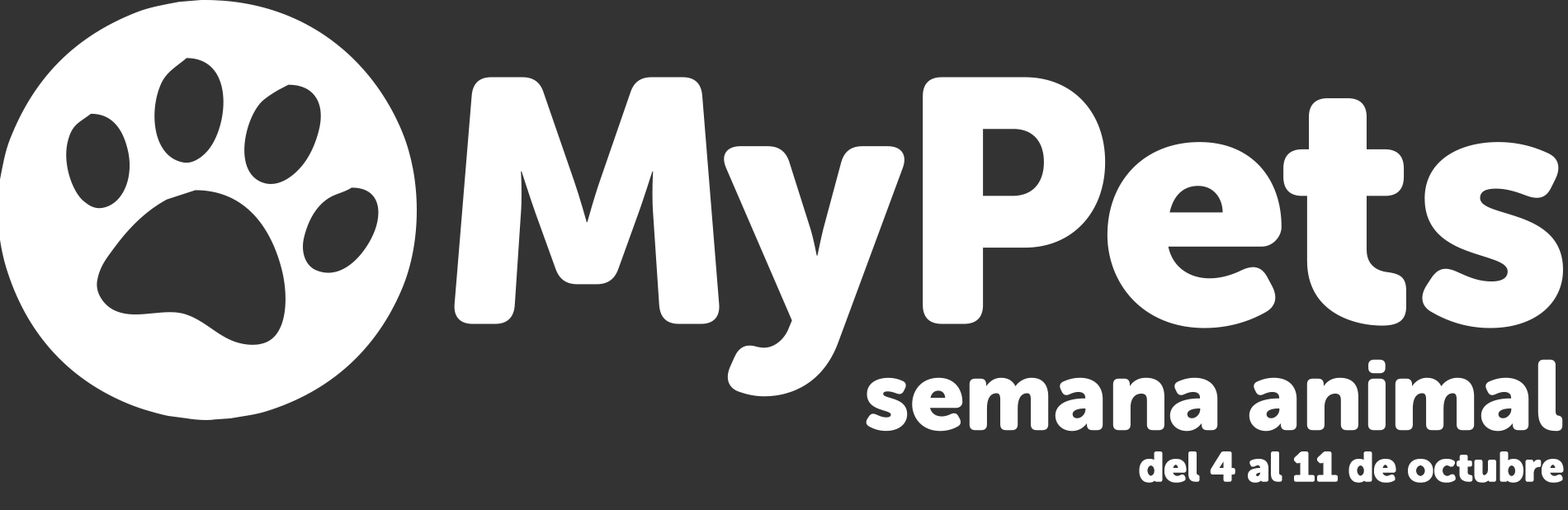
<style>
.page{position:relative;width:1568px;height:510px;background:#333333}
.page>*{position:absolute;margin:0}
.t1{font:98.6px "MuseoSansRounded-900";letter-spacing:-0.02em;color:#ffffff;font-weight:bold}
.t2{font:41px "MuseoSansRounded-900";letter-spacing:-0.02em;color:#ffffff;font-weight:bold}
</style>
<div class="page">
<p class="t1" style="left:866px;top:359px;width:697px;height:73px">semana animal</p>
<p class="t2" style="left:1139px;top:451px;width:425px;height:32px">del 4 al 11 de octubre</p>
</div>
